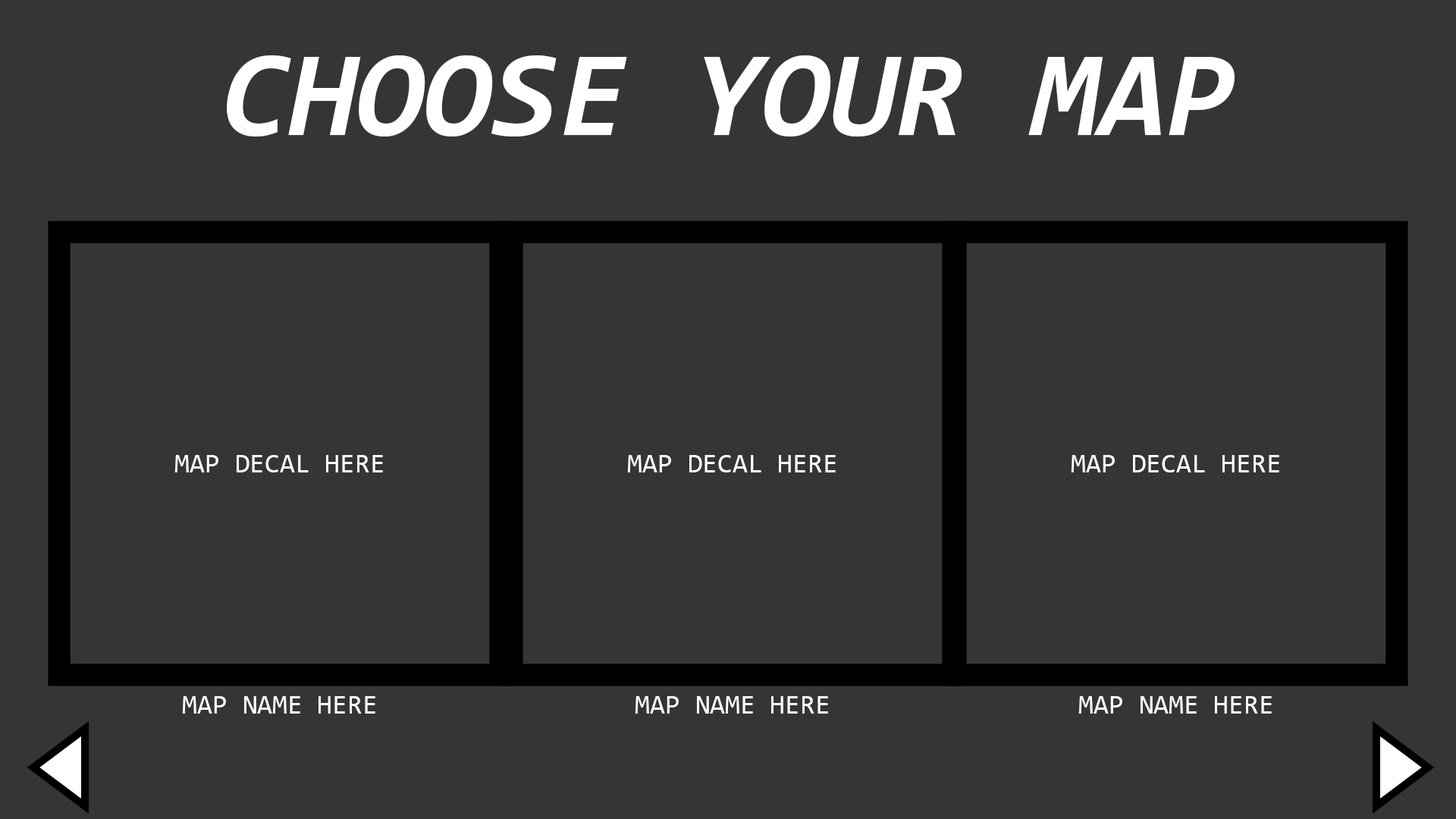
<style>
.page{position:relative;width:1456px;height:819px;background:#353535}
.page>*{position:absolute;margin:0}
.t1{font:122.8px "Consolas-BoldItalic";color:#ffffff;text-transform:uppercase}
.t2{font:27.3px "Consolas";color:#ffffff;text-transform:uppercase}
</style>
<div class="page">
<p class="t1" style="left:227px;top:55px;width:1008px;height:81px">Choose Your map</p>
<p class="t2" style="left:174px;top:455px;width:209px;height:17px">Map Decal here</p>
<p class="t2" style="left:627px;top:455px;width:209px;height:17px">Map Decal here</p>
<p class="t2" style="left:1071px;top:455px;width:208px;height:17px">Map Decal here</p>
<p class="t2" style="left:182px;top:696px;width:193px;height:18px">Map NAme Here</p>
<p class="t2" style="left:635px;top:696px;width:193px;height:18px">Map NAme Here</p>
<p class="t2" style="left:1078px;top:696px;width:194px;height:18px">Map NAme Here</p>
</div>
